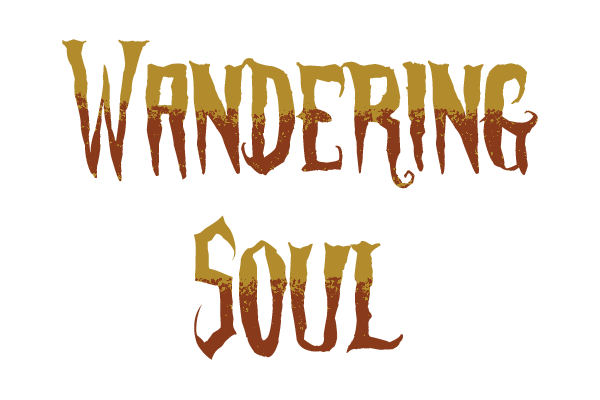
<style>
.page{position:relative;width:600px;height:400px;background:#ffffff}
.page>*{position:absolute;margin:0}
.t1{font:75px "PhantomFingers"}
</style>
<div class="page">
<p class="t1" style="left:62px;top:39px;width:476px;height:321px;text-align:center">Wandering<br><br>Soul</p>
</div>
